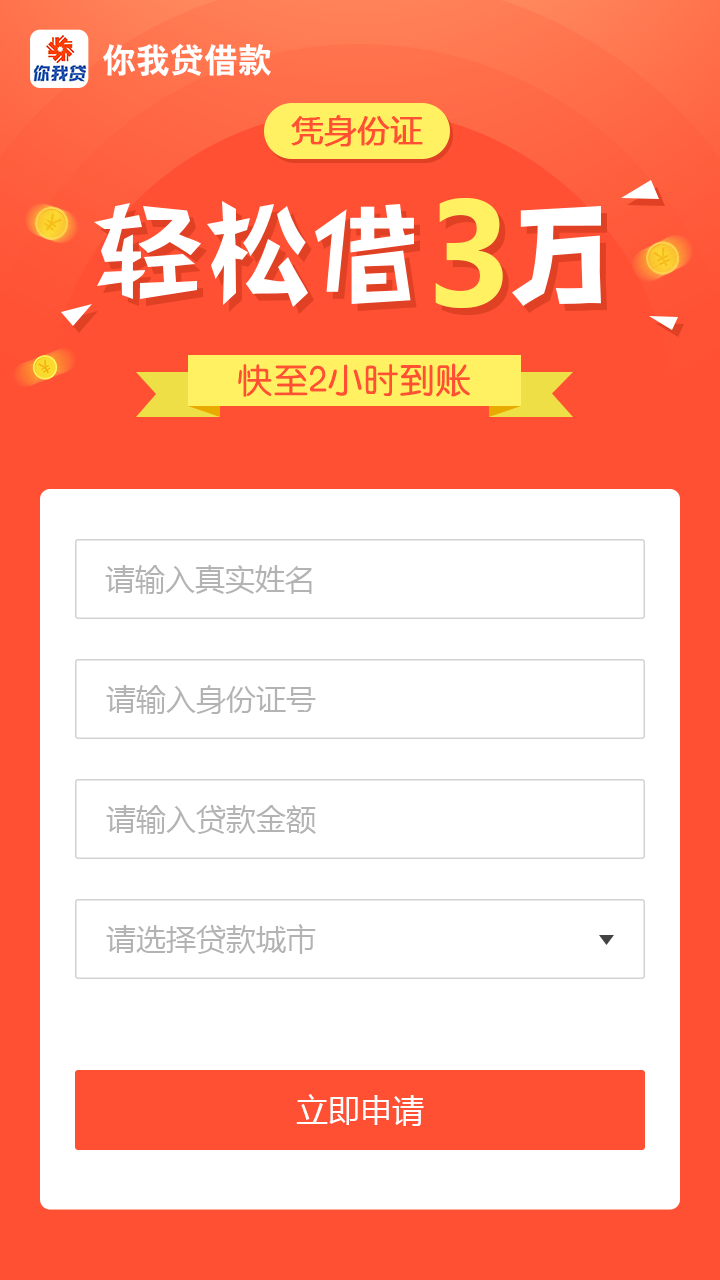
<style>
.page{position:relative;width:720px;height:1280px;background:#ffffff}
.page>*{position:absolute;margin:0}
.t1{font:34px "HYb2gj";color:#ffffff}
.t2{font:32px "MicrosoftYaHei";color:#ff5033;font-weight:bold}
.t3{font:139.6px "MicrosoftYaHei-Bold";color:#fff162}
.t4{font:36px "HYe3gj";color:#ff5033}
.t5{font:30px "MicrosoftYaHei";color:#b3b3b3}
.t6{font:32px "MicrosoftYaHei";color:#ffffff}
</style>
<div class="page">
<p class="t1" style="left:103px;top:44px;width:168px;height:32px">你我贷借款</p>
<p class="t2" style="left:291px;top:115px;width:132px;height:32px">凭身份证</p>
<p class="t3" style="left:435px;top:198px;width:68px;height:110px">3</p>
<p class="t4" style="left:238px;top:363px;width:232px;height:34px">快至2小时到账</p>
<p class="t5" style="left:105px;top:565px;width:207px;height:29px">请输入真实姓名</p>
<p class="t5" style="left:106px;top:685px;width:210px;height:29px">请输入身份证号</p>
<p class="t5" style="left:106px;top:805px;width:210px;height:29px">请输入贷款金额</p>
<p class="t5" style="left:106px;top:924px;width:210px;height:30px">请选择贷款城市</p>
<p class="t6" style="left:296px;top:1094px;width:128px;height:32px">立即申请</p>
</div>
